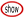
<style>
.page{position:relative;width:25px;height:18px;background:#ffffff}
.page>*{position:absolute;margin:0}
.t1{font:10.5px "Verdana";letter-spacing:0.01em;scale:0.5 1}
</style>
<div class="page">
<p class="t1" style="left:5px;top:3px;width:14px;height:12px">show</p>
</div>
